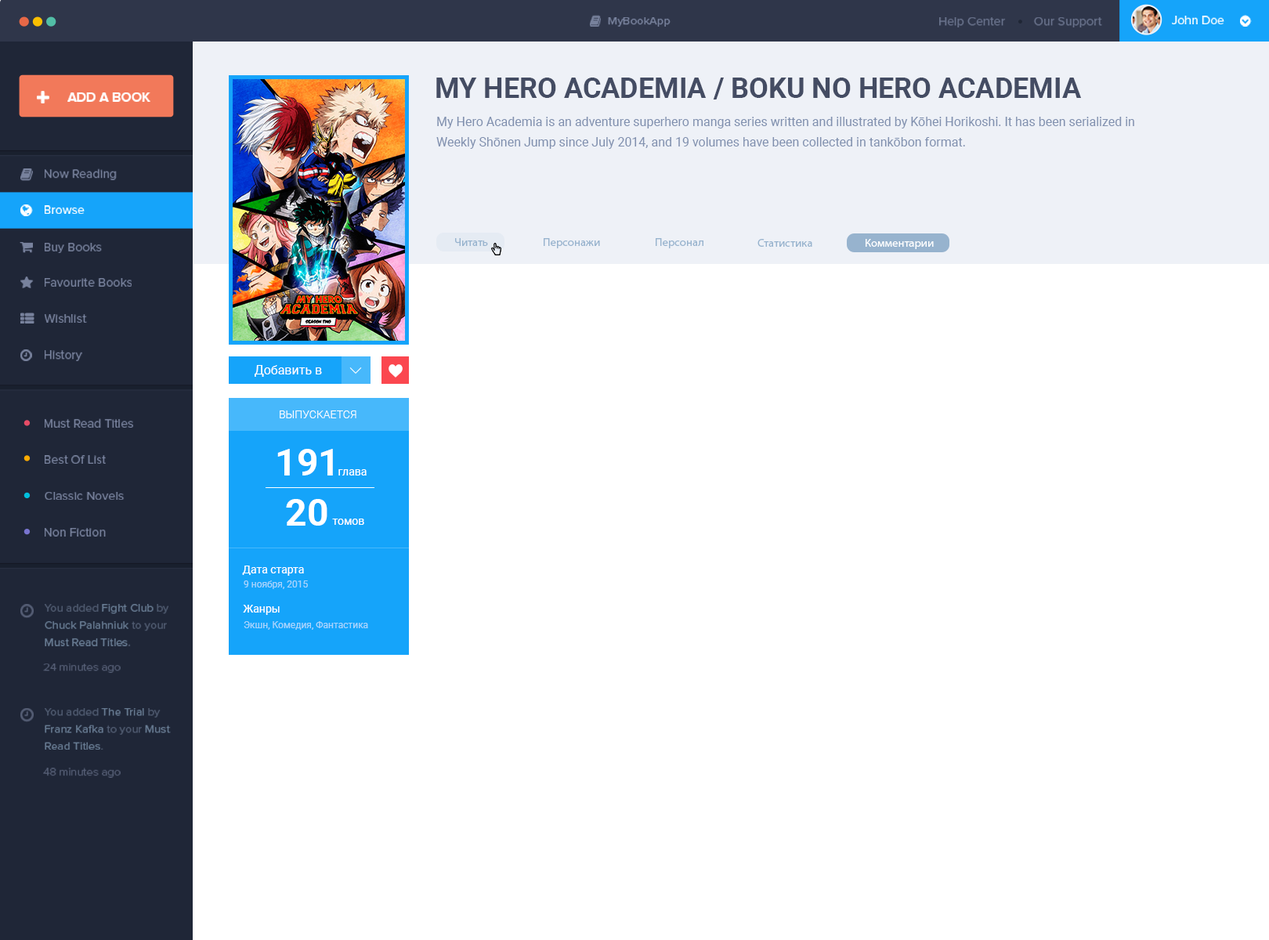
<style>
.page{position:relative;width:1269px;height:940px;background:#ffffff}
.page>*{position:absolute;margin:0}
.t1{font:11.4px "ProximaNova-Regular";color:#78829d}
.t2{font:12.4px "ProximaNova-Regular";color:#78829d}
.t3{font:12.4px "ProximaNova-Regular";color:#ffffff}
.t4{font:28.2px "Roboto-Bold";color:#444c63}
.t5{font:13.3px "ProximaNova-Bold";color:#ffffff;text-transform:uppercase}
.t6{font:12.5px/20.4px "Roboto-Regular";color:#8090af}
.t7{font:11.4px "MyriadPro-Regular";color:#97b3ce}
.t8{font:11.4px "MyriadPro-Regular";color:#ffffff}
.t9{font:12.5px "Roboto-Regular";color:#ffffff}
.t10{font:11px "Roboto-Light";color:#ffffff}
.t11{font:37.6px "Roboto-Bold";color:#ffffff}
.t12{font:11px "Roboto-Regular";color:#ffffff}
.t13{font:9.4px "Roboto-Regular";color:#a7d5fd}
.t14{font:11.4px/17.2px "ProximaNova-Regular";color:#97b3ce}
.t15{font:11.4px/17.2px "ProximaNova-Regular";color:#6f7d95}
.t16{font:11.4px "ProximaNova-Light";color:#545d74}
</style>
<div class="page">
<p class="t1" style="left:608px;top:17px;width:62px;height:10px">MyBookApp</p>
<p class="t2" style="left:939px;top:17px;width:163px;height:10px">Help Center         Our Support</p>
<p class="t3" style="left:1172px;top:16px;width:52px;height:8px">John Doe</p>
<p class="t4" style="left:436px;top:78px;width:645px;height:21px">MY HERO ACADEMIA / BOKU NO HERO ACADEMIA</p>
<p class="t5" style="left:67px;top:92px;width:83px;height:10px">Add a Book</p>
<p class="t6" style="left:436px;top:117px;width:698px;height:32px">My Hero Academia is an adventure superhero manga series written and illustrated by Kōhei Horikoshi. It has been serialized in <br>Weekly Shōnen Jump since July 2014, and 19 volumes have been collected in tankōbon format.</p>
<p class="t2" style="left:45px;top:168px;width:72px;height:12px">Now Reading</p>
<p class="t3" style="left:45px;top:205px;width:40px;height:9px">Browse</p>
<p class="t2" style="left:45px;top:243px;width:57px;height:10px">Buy Books</p>
<p class="t7" style="left:455px;top:238px;width:33px;height:8px">Читать</p>
<p class="t7" style="left:544px;top:238px;width:56px;height:10px">Персонажи</p>
<p class="t7" style="left:656px;top:238px;width:47px;height:10px">Персонал</p>
<p class="t7" style="left:757px;top:239px;width:55px;height:8px">Статистика</p>
<p class="t8" style="left:865px;top:239px;width:69px;height:10px">Комментарии</p>
<p class="t2" style="left:45px;top:278px;width:87px;height:9px">Favourite Books</p>
<p class="t2" style="left:45px;top:314px;width:42px;height:9px">Wishlist</p>
<p class="t2" style="left:45px;top:350px;width:37px;height:11px">History</p>
<p class="t9" style="left:255px;top:365px;width:67px;height:12px">Добавить в</p>
<p class="t10" style="left:280px;top:410px;width:76px;height:8px">ВЫПУСКАЕТСЯ</p>
<p class="t2" style="left:45px;top:418px;width:89px;height:10px">Must Read Titles</p>
<p class="t11" style="left:277px;top:449px;width:56px;height:26px">191</p>
<p class="t2" style="left:45px;top:455px;width:61px;height:9px">Best Of List</p>
<p class="t12" style="left:338px;top:469px;width:29px;height:6px">глава</p>
<p class="t2" style="left:45px;top:492px;width:80px;height:8px">Classic Novels</p>
<p class="t11" style="left:286px;top:499px;width:41px;height:27px">20</p>
<p class="t12" style="left:332px;top:518px;width:32px;height:7px">томов</p>
<p class="t2" style="left:45px;top:528px;width:61px;height:8px">Non Fiction</p>
<p class="t12" style="left:242px;top:565px;width:62px;height:11px">Дата старта</p>
<p class="t13" style="left:244px;top:580px;width:64px;height:9px">9 ноября, 2015</p>
<p class="t14" style="left:45px;top:604px;width:123px;height:42px"><span class="t15">You added </span>Fight Club <span class="t15">by </span>Chuck Palahniuk<span class="t15"> to your </span>Must Read Titles<span class="t15">.</span></p>
<p class="t12" style="left:243px;top:605px;width:37px;height:10px">Жанры</p>
<p class="t13" style="left:244px;top:621px;width:124px;height:9px">Экшн, Комедия, Фантастика</p>
<p class="t16" style="left:43px;top:663px;width:78px;height:10px">24 minutes ago</p>
<p class="t14" style="left:45px;top:708px;width:126px;height:42px"><span class="t15">You added </span>The Trial <span class="t15">by </span>Franz Kafka <span class="t15">to your </span>Must Read Titles<span class="t15">.</span></p>
<p class="t16" style="left:43px;top:768px;width:78px;height:10px">48 minutes ago</p>
</div>
